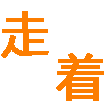
<style>
.page{position:relative;width:108px;height:108px;background:#ffffff}
.page>*{position:absolute;margin:0}
.t1{font:48px/44px "MicrosoftYaHei";color:#fc7d00;font-weight:bold}
</style>
<div class="page">
<p class="t1" style="left:1px;top:11px;width:103px;height:90px;text-align:center">走<br>       着</p>
</div>
